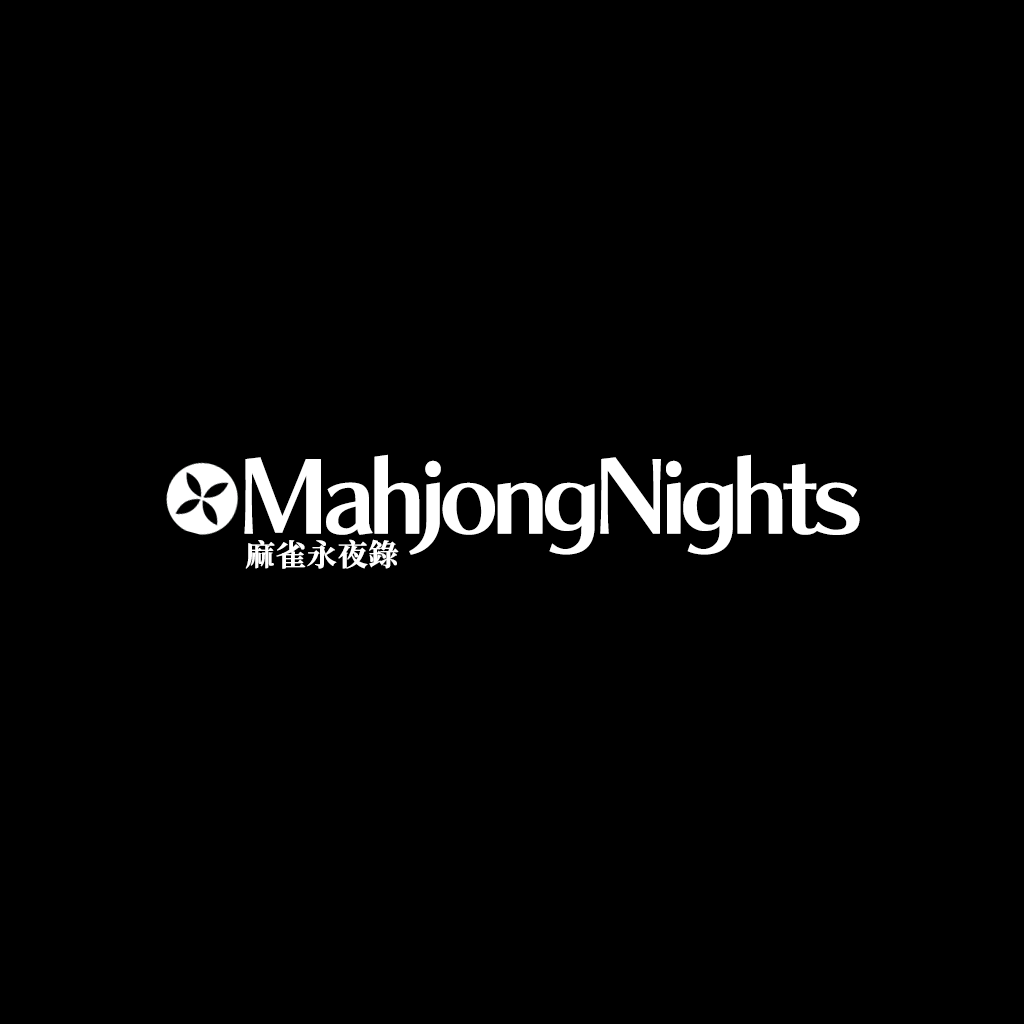
<style>
.page{position:relative;width:1024px;height:1024px;background:#000000}
.page>*{position:absolute;margin:0}
.t1{font:100px "ChiaroStd-B";letter-spacing:-0.1em;color:#ffffff;font-weight:bold}
.t2{font:30px "SourceHanSerifTC-Bold";color:#ffffff;font-weight:bold}
</style>
<div class="page">
<p class="t1" style="left:244px;top:454px;width:616px;height:101px">MahjongNights</p>
<p class="t2" style="left:245px;top:539px;width:154px;height:30px">麻雀永夜錄</p>
</div>
